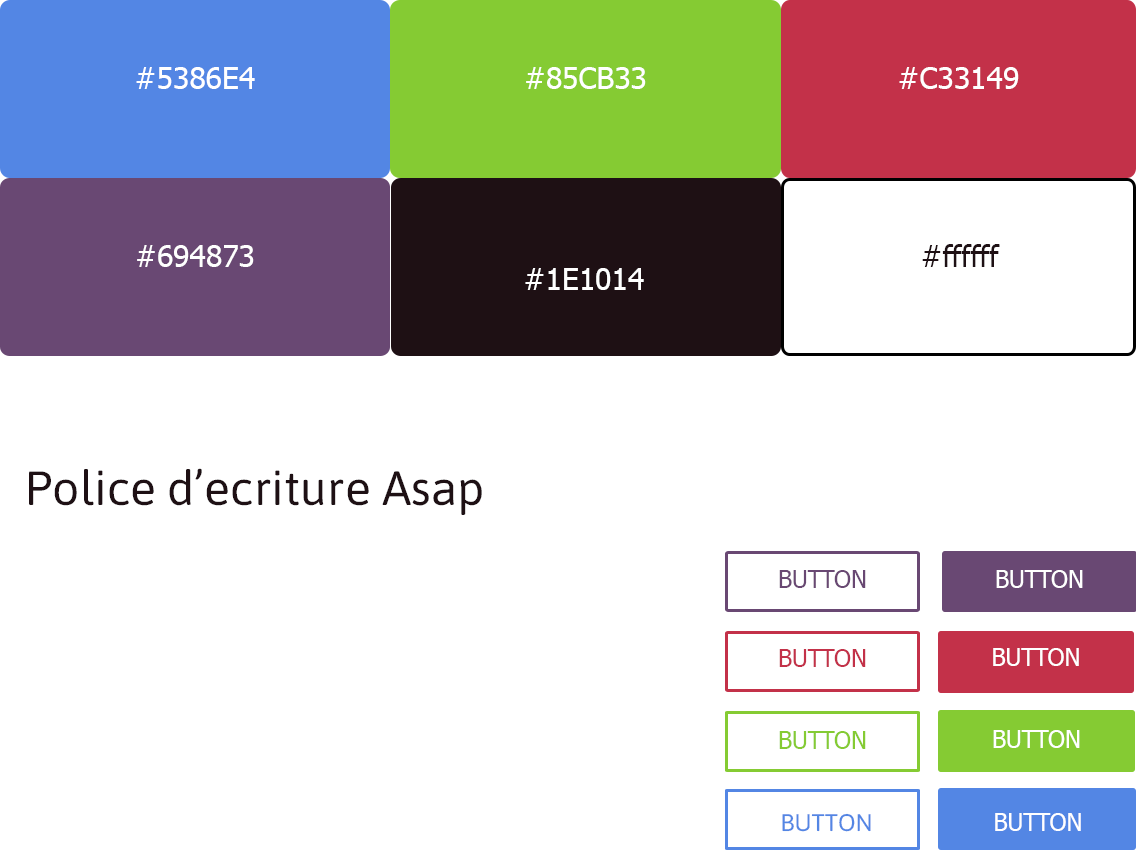
<style>
.page{position:relative;width:1136px;height:850px;background:#ffffff}
.page>*{position:absolute;margin:0}
.t1{font:30px "Tahoma";color:#ffffff}
.t2{font:30px "Tahoma";color:#1e1014}
.t3{font:48px "Asap-Regular";color:#1e1014}
.t4{font:24px "Tahoma";color:#694873}
.t5{font:24px "Tahoma";color:#ffffff}
.t6{font:24px "Tahoma";color:#c33149}
.t7{font:24px "Tahoma";color:#85cb33}
.t8{font:24px "Asap-Regular";color:#5386e4}
</style>
<div class="page">
<p class="t1" style="left:136px;top:67px;width:119px;height:22px">#5386E4</p>
<p class="t1" style="left:526px;top:67px;width:120px;height:22px">#85CB33</p>
<p class="t1" style="left:899px;top:67px;width:120px;height:22px">#C33149</p>
<p class="t1" style="left:137px;top:245px;width:117px;height:22px">#694873</p>
<p class="t2" style="left:922px;top:244px;width:78px;height:23px">#ffffff</p>
<p class="t1" style="left:525px;top:268px;width:119px;height:22px">#1E1014</p>
<p class="t3" style="left:29px;top:468px;width:453px;height:47px">Police d’ecriture Asap</p>
<p class="t4" style="left:779px;top:570px;width:87px;height:18px">BUTTON</p>
<p class="t5" style="left:996px;top:570px;width:87px;height:18px">BUTTON</p>
<p class="t6" style="left:779px;top:649px;width:87px;height:18px">BUTTON</p>
<p class="t5" style="left:993px;top:648px;width:86px;height:18px">BUTTON</p>
<p class="t7" style="left:779px;top:731px;width:87px;height:18px">BUTTON</p>
<p class="t5" style="left:993px;top:730px;width:87px;height:18px">BUTTON</p>
<p class="t8" style="left:782px;top:813px;width:89px;height:19px">BUTTON</p>
<p class="t5" style="left:995px;top:813px;width:86px;height:18px">BUTTON</p>
</div>
